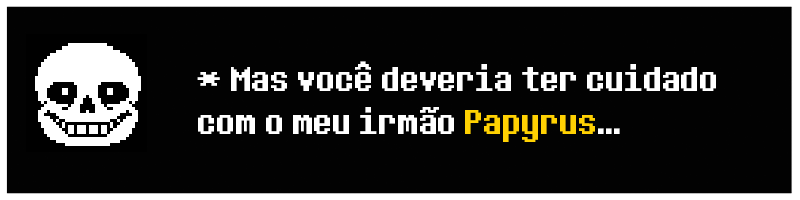
<style>
.page{position:relative;width:800px;height:200px;background:#020202}
.page>*{position:absolute;margin:0}
.t1{font:36px "DeterminationSans";color:#ffffff}
.t2{font:36px "DeterminationSans";color:#ffd102}
</style>
<div class="page">
<p class="t1" style="left:197px;top:61px;width:519px;height:81px">* Mas você deveria ter cuidado com o meu irmão <span class="t2">Papyrus</span>...</p>
</div>
